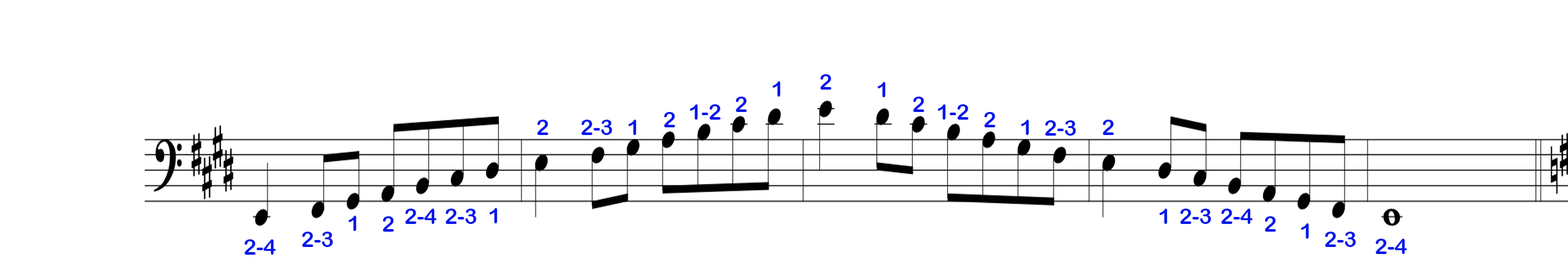
<style>
.page{position:relative;width:1568px;height:279px;background:#ffffff}
.page>*{position:absolute;margin:0}
.t1{font:21.8px "ArialRoundedMTBold";color:#0417ec}
</style>
<div class="page">
<p class="t1" style="left:820px;top:74px;width:11px;height:16px">2</p>
<p class="t1" style="left:772px;top:81px;width:9px;height:16px">1</p>
<p class="t1" style="left:878px;top:82px;width:8px;height:15px">1</p>
<p class="t1" style="left:735px;top:97px;width:12px;height:15px">2</p>
<p class="t1" style="left:913px;top:97px;width:11px;height:15px">2</p>
<p class="t1" style="left:664px;top:112px;width:11px;height:15px">2</p>
<p class="t1" style="left:690px;top:104px;width:31px;height:16px">1-2</p>
<p class="t1" style="left:938px;top:104px;width:30px;height:16px">1-2</p>
<p class="t1" style="left:984px;top:112px;width:11px;height:15px">2</p>
<p class="t1" style="left:537px;top:120px;width:11px;height:15px">2</p>
<p class="t1" style="left:581px;top:120px;width:31px;height:15px">2-3</p>
<p class="t1" style="left:628px;top:120px;width:9px;height:15px">1</p>
<p class="t1" style="left:1021px;top:120px;width:8px;height:15px">1</p>
<p class="t1" style="left:1045px;top:120px;width:31px;height:16px">2-3</p>
<p class="t1" style="left:1102px;top:120px;width:12px;height:15px">2</p>
<p class="t1" style="left:405px;top:209px;width:32px;height:15px">2-4</p>
<p class="t1" style="left:445px;top:209px;width:32px;height:15px">2-3</p>
<p class="t1" style="left:489px;top:208px;width:9px;height:16px">1</p>
<p class="t1" style="left:1159px;top:209px;width:9px;height:15px">1</p>
<p class="t1" style="left:1180px;top:209px;width:31px;height:15px">2-3</p>
<p class="t1" style="left:1221px;top:209px;width:32px;height:15px">2-4</p>
<p class="t1" style="left:348px;top:216px;width:9px;height:15px">1</p>
<p class="t1" style="left:382px;top:216px;width:12px;height:16px">2</p>
<p class="t1" style="left:1264px;top:216px;width:12px;height:16px">2</p>
<p class="t1" style="left:302px;top:232px;width:31px;height:15px">2-3</p>
<p class="t1" style="left:1301px;top:224px;width:8px;height:15px">1</p>
<p class="t1" style="left:1325px;top:232px;width:31px;height:15px">2-3</p>
<p class="t1" style="left:244px;top:240px;width:32px;height:15px">2-4</p>
<p class="t1" style="left:1375px;top:239px;width:32px;height:15px">2-4</p>
</div>
